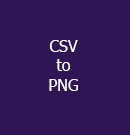
<style>
.page{position:relative;width:130px;height:135px;background:#2f1554}
.page>*{position:absolute;margin:0}
.t1{font:12px "Tahoma";color:#fcfcfa}
</style>
<div class="page">
<p class="t1" style="left:49px;top:40px;width:29px;height:51px;text-align:center">CSV<br>to<br>PNG</p>
</div>
